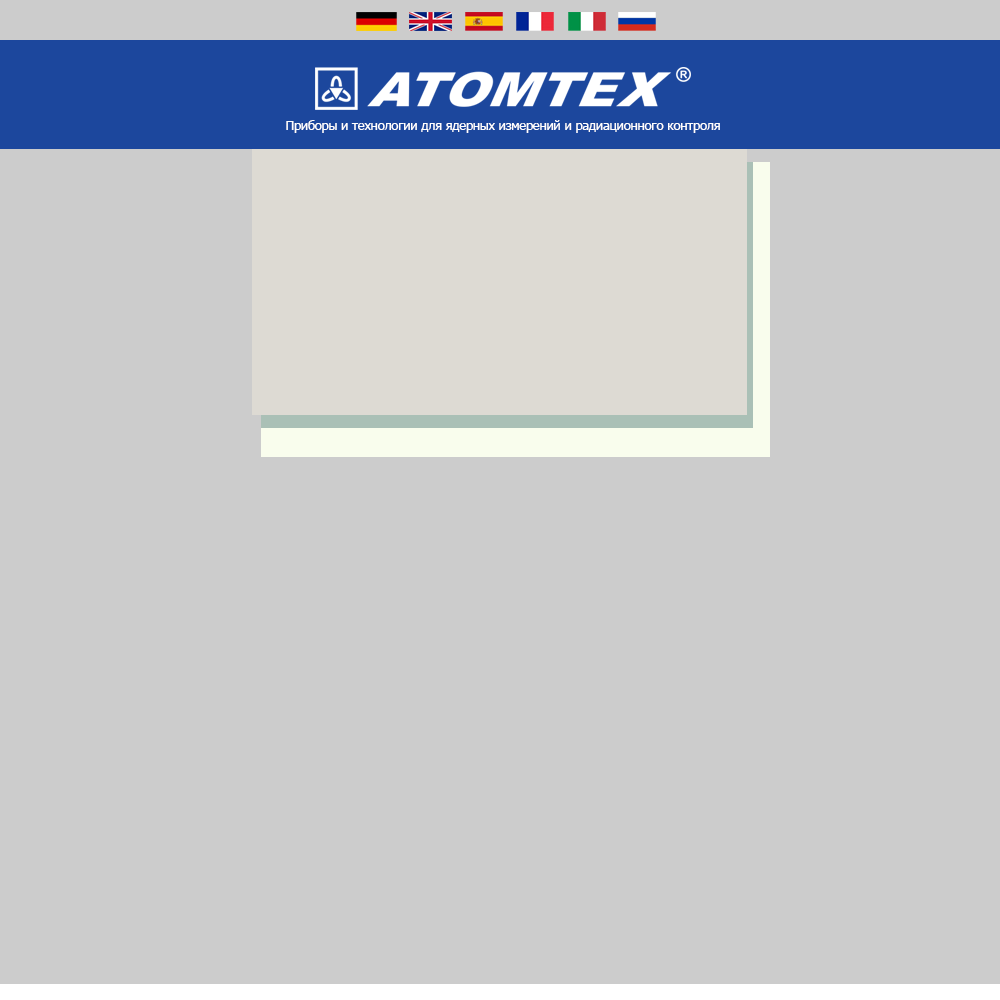
<style>
.page{position:relative;width:1000px;height:1000px;background:#cccccc}
.page>*{position:absolute;margin:0}
.t1{font:12.5px "Tahoma";color:#ffffff}
</style>
<div class="page">
<p class="t1" style="left:286px;top:120px;width:434px;height:13px">Приборы и технологии для ядерных измерений и радиационного контроля</p>
</div>
